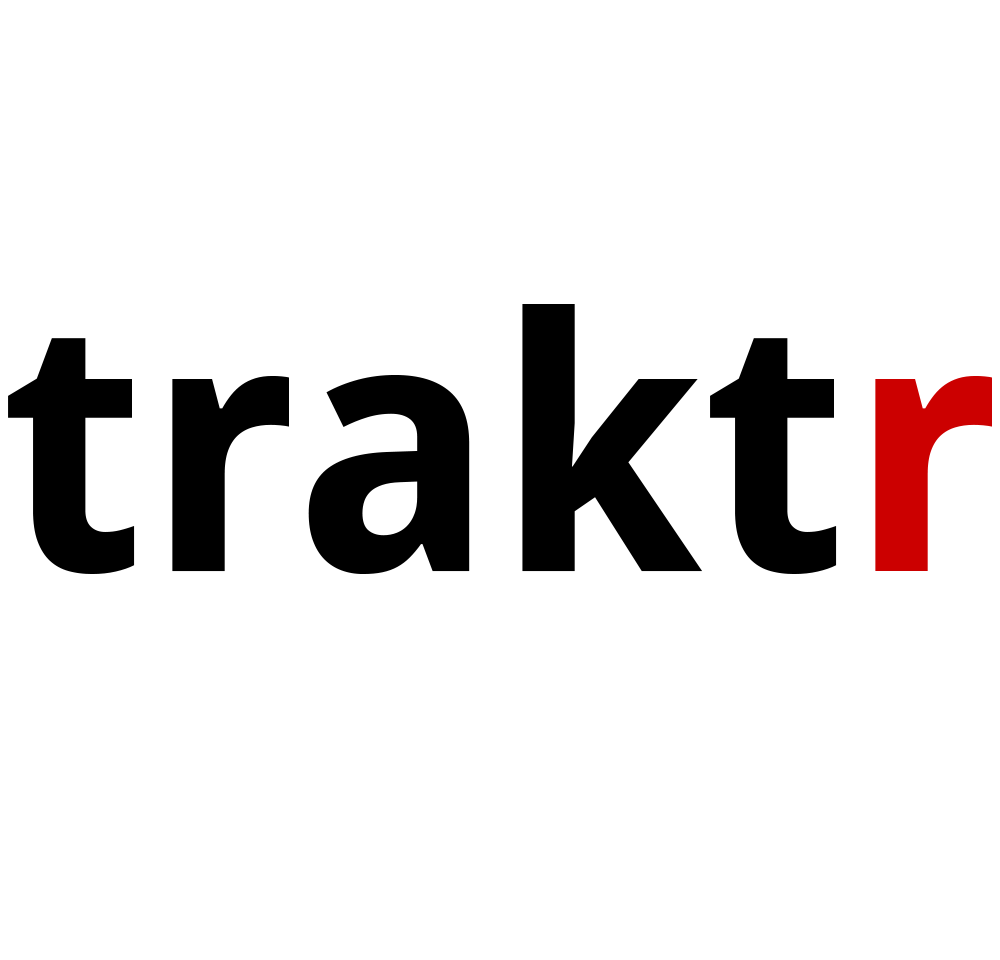
<style>
.page{position:relative;width:1000px;height:960px;background:#ffffff}
.page>*{position:absolute;margin:0}
.t1{font:350.9px "DroidSans-Bold";color:#000000}
.t2{font:350.9px "DroidSans-Bold";color:#cc0000}
</style>
<div class="page">
<p class="t1" style="left:8px;top:304px;width:984px;height:270px">trakt<span class="t2">r</span></p>
</div>
